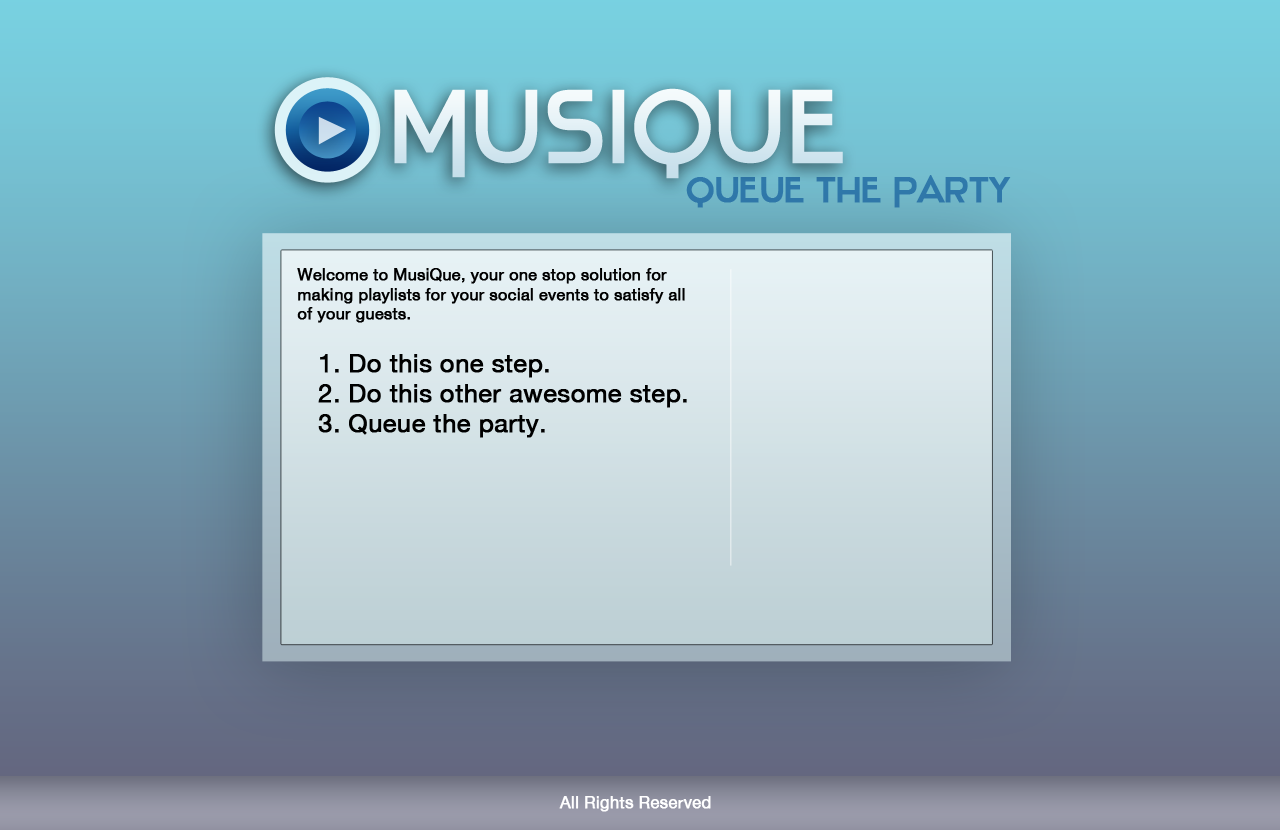
<style>
.page{position:relative;width:1280px;height:830px}
.page>*{position:absolute;margin:0}
.t1{font:103.2px "Stentiga-Regular";color:#e2f0f5;font-weight:bold}
.t2{font:35.2px "Stentiga-Regular";color:#2f78aa;font-weight:bold}
.t3{font:16.1px "HelveticaNeue";color:#000000;font-weight:bold}
.t4{font:25.1px "HelveticaNeue";color:#000000;font-weight:bold}
.t5{font:16.4px "HelveticaNeue";color:#ffffff;font-weight:bold}
</style>
<div class="page">
<p class="t1" style="left:394px;top:88px;width:449px;height:91px">Musique</p>
<p class="t2" style="left:686px;top:175px;width:325px;height:33px">Queue the Party</p>
<p class="t3" style="left:297px;top:268px;width:388px;height:55px">Welcome to MusiQue, your one stop solution for making playlists for your social events to satisfy all of your guests.</p>
<p class="t4" style="left:318px;top:354px;width:369px;height:84px">1. Do this one step.<br>2. Do this other awesome step.<br>3. Queue the party.</p>
<p class="t5" style="left:559px;top:796px;width:152px;height:16px">All Rights Reserved</p>
</div>
